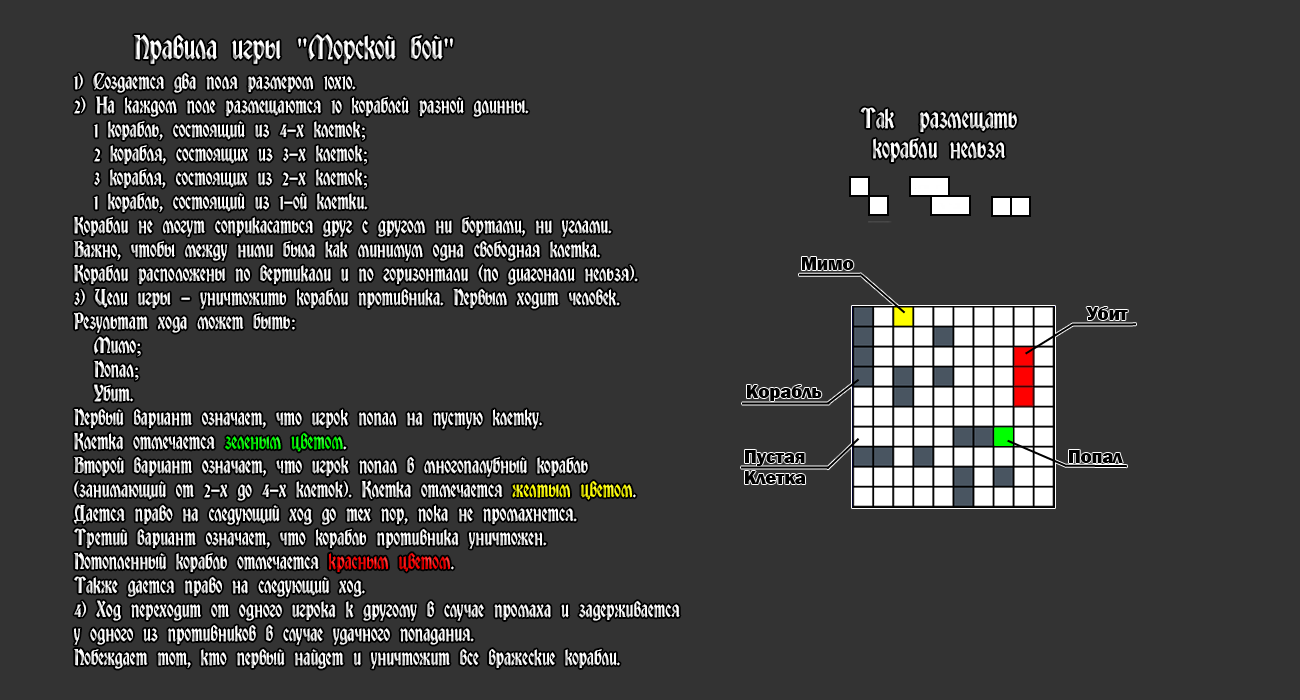
<style>
.page{position:relative;width:1300px;height:700px;background:#333333}
.page>*{position:absolute;margin:0}
.t1{font:30px "RomvelCyr";color:#ffffff}
.t2{font:30px "RomvelCyr";color:#000000}
.t3{font:30px "TimesNewRomanPSMT";color:#ffffff}
.t4{font:20px "RomvelCyr";color:#ffffff}
.t5{font:20px "TimesNewRomanPSMT";color:#ffffff}
.t6{font:20px "RomvelCyr";color:#00ff00}
.t7{font:20px "RomvelCyr";color:#ffff00}
.t8{font:20px "RomvelCyr";color:#ff0000}
.t9{font:25px "RomvelCyr";color:#ffffff}
</style>
<div class="page">
<p class="t1" style="left:134px;top:34px;width:319px;height:30px"><span class="t2"> </span>       Правила игры <span class="t3">"</span>Морской бой<span class="t3">"</span></p>
<p class="t4" style="left:74px;top:72px;width:606px;height:597px">1) Создается два поля размером 10x10.<br>2) На каждом поле размещаются 10 кораблей разной длинны.<br>  1 корабль, состоящий из 4-х клеток<span class="t5">;<br>    </span>2 корабля, состоящих из 3-х клеток<span class="t5">;</span><br>  3 корабля, состоящих из 2-х клеток<span class="t5">;</span><br>  1 корабль, состоящий из 1-ой клетки.<br>Корабли не могут соприкасаться друг с другом ни бортами, ни углами.<br>Важно, чтобы между ними была как минимум одна свободная клетка.<br>Корабли расположены по вертикали и по горизонтали (по диагонали нельзя).<br>3) Цели игры - уничтожить корабли противника. Первым ходит человек.<br>Результат хода может быть<span class="t5">:</span><br>  Мимо<span class="t5">;</span><br>  Попал<span class="t5">;</span><br>  Убит.<br>Первый вариант означает, что игрок попал на пустую клетку.<br>Клетка отмечается <span class="t6">зеленым цветом</span>.<br>Второй вариант означает, что игрок попал в многопалубный корабль<br>(занимающий от 2-х до 4-х клеток). Клетка отмечается <span class="t7">желтым цветом</span>.<br>Дается право на следующий ход до тех пор, пока не промахнется.<br>Третий вариант означает, что корабль противника уничтожен.<br>Потопленный корабль отмечается <span class="t8">красным цветом</span>.<br>Также дается право на следующий ход.<br>4) Ход переходит от одного игрока к другому в случае промаха и задерживается<br>у одного из противников в случае удачного попадания.<br>Побеждает тот, кто первый найдет и уничтожит все вражеские корабли.</p>
<p class="t9" style="left:860px;top:107px;width:157px;height:55px">Так  размещать <br> корабли нельзя</p>
</div>
